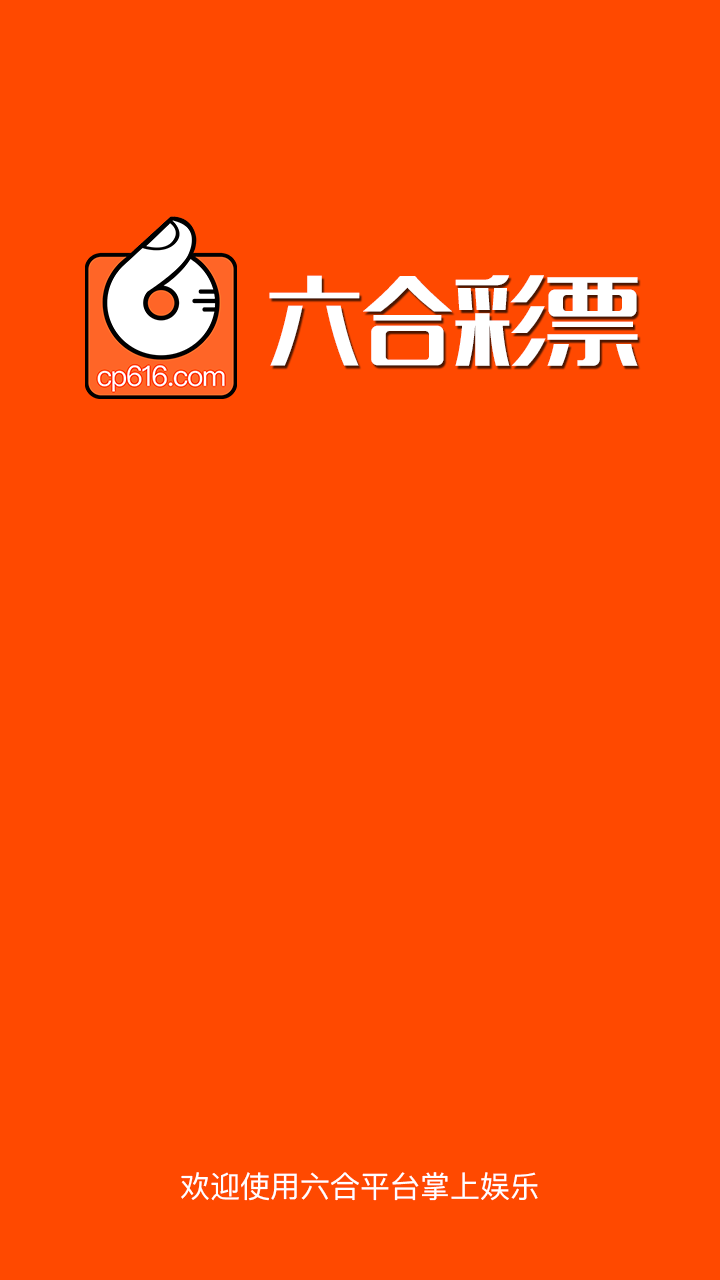
<style>
.page{position:relative;width:720px;height:1280px;background:#ff4900}
.page>*{position:absolute;margin:0}
.t1{font:95px "MFLangQian_Noncommercial-Regular";letter-spacing:-0.025em;color:#ffffff}
.t2{font:30px "PingFangSC-Regular";color:#ffffff}
</style>
<div class="page">
<p class="t1" style="left:269px;top:275px;width:369px;height:91px">六合彩票</p>
<p class="t2" style="left:181px;top:1172px;width:357px;height:29px">欢迎使用六合平台掌上娱乐</p>
</div>
